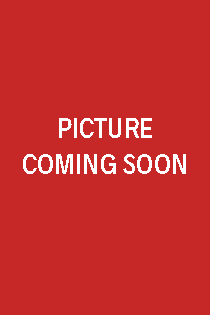
<style>
.page{position:relative;width:210px;height:315px;background:#c62828}
.page>*{position:absolute;margin:0}
.t1{font:29.3px/33.9px "Radnika-MediumCondensed";color:#ffffff}
</style>
<div class="page">
<p class="t1" style="left:23px;top:118px;width:163px;height:56px;text-align:center">PICTURE<br>COMING SOON</p>
</div>
